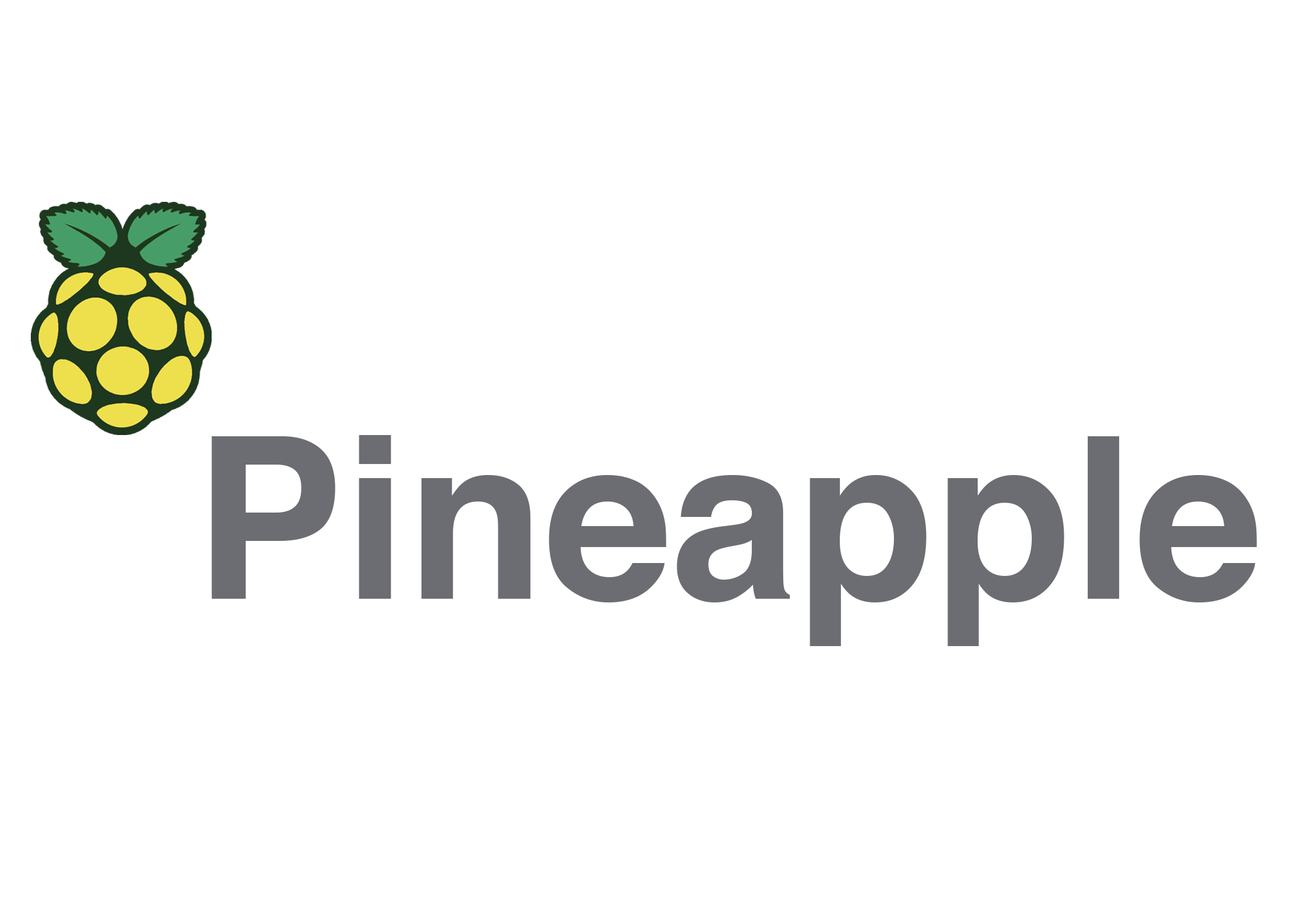
<style>
.page{position:relative;width:1292px;height:923px;background:#ffffff}
.page>*{position:absolute;margin:0}
.t1{font:226.1px "Helvetica-Bold";color:#6c6d72}
</style>
<div class="page">
<p class="t1" style="left:212px;top:435px;width:1045px;height:211px">Pineapple</p>
</div>
